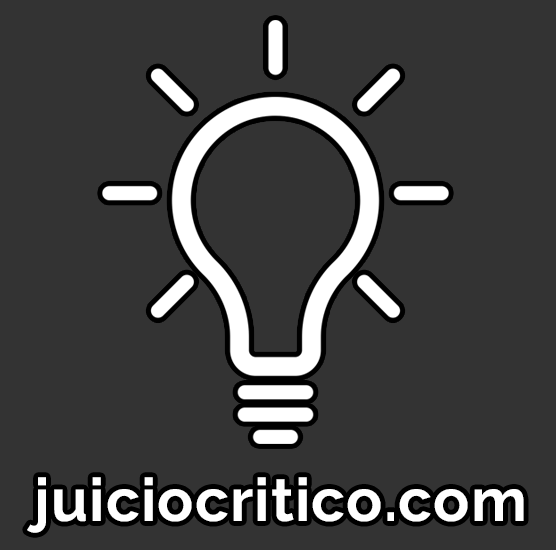
<style>
.page{position:relative;width:556px;height:550px;background:#333333}
.page>*{position:absolute;margin:0}
.t1{font:60px "Raleway-Bold";letter-spacing:0.02em;color:#ffffff}
</style>
<div class="page">
<p class="t1" style="left:27px;top:477px;width:497px;height:56px">juiciocritico.com</p>
</div>
